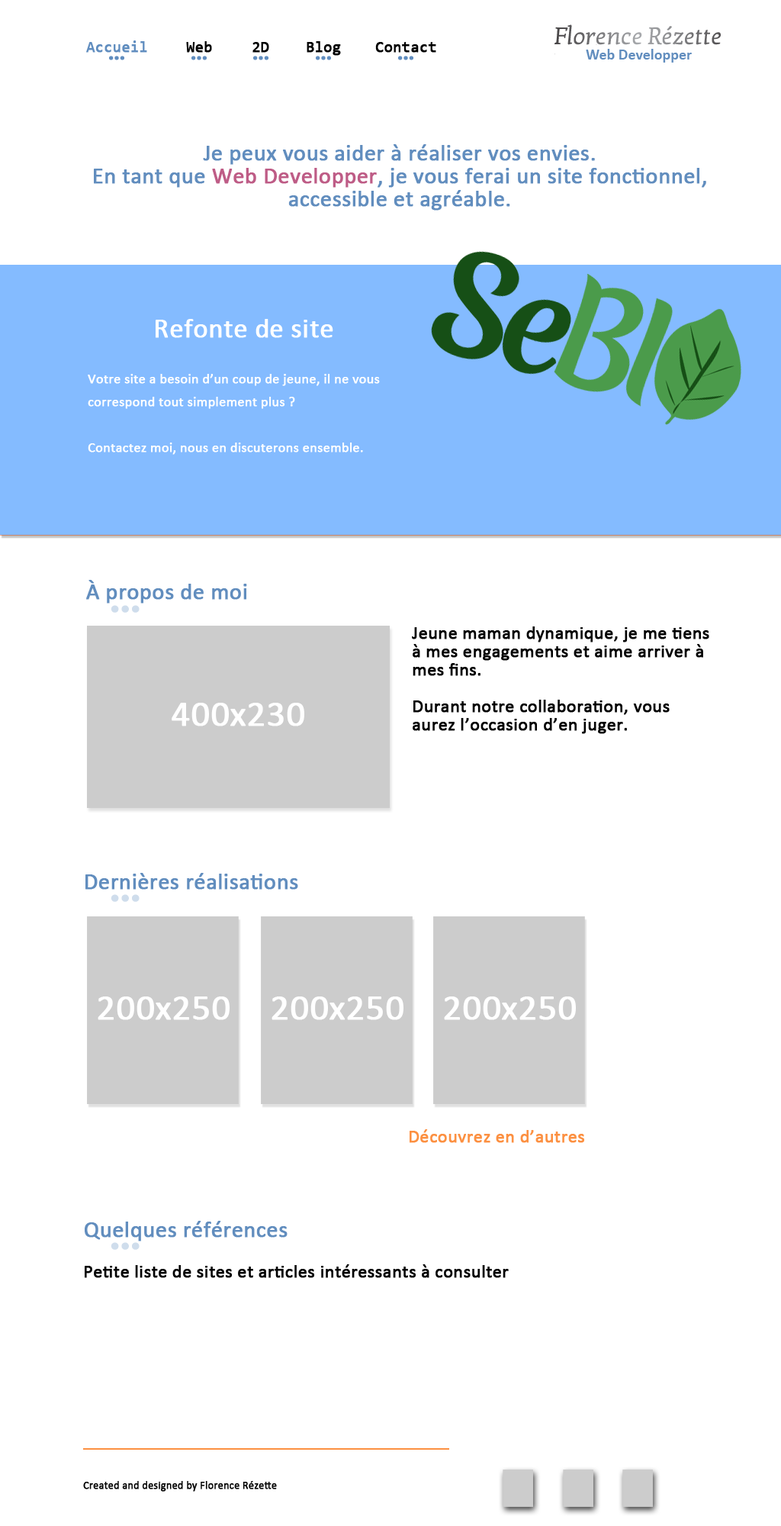
<style>
.page{position:relative;width:781px;height:1526px;background:#ffffff}
.page>*{position:absolute;margin:0}
.t1{font:15.3px "Consolas";color:#608dbf;font-weight:bold}
.t2{font:15.3px "Consolas";color:#000000;font-weight:bold}
.t3{font:15.3px "Consolas";color:#000101;font-weight:bold}
.t4{font:22.9px/22.9px "Calibri";color:#618dbe;font-weight:bold}
.t5{font:22.9px/22.9px "Calibri";color:#be5c86;font-weight:bold}
.t6{font:13.7px/22.9px "Calibri";color:#ffffff;font-weight:bold}
.t7{font:27.5px/22.9px "Calibri";color:#ffffff;font-weight:bold}
.t8{font:22.9px "Calibri";color:#618dbe;font-weight:bold}
.t9{font:18.3px/18.3px "Calibri";color:#000000;font-weight:bold}
.t10{font:36.6px "Calibri";color:#ffffff;font-weight:bold}
.t11{font:18.3px "Calibri";color:#fc9041;font-weight:bold}
.t12{font:18.3px "Calibri";color:#000000;font-weight:bold}
.t13{font:10.7px "Calibri";color:#000000;font-weight:bold}
</style>
<div class="page">
<p class="t1" style="left:86px;top:40px;width:61px;height:13px">Accueil</p>
<p class="t2" style="left:186px;top:41px;width:26px;height:12px">Web</p>
<p class="t3" style="left:253px;top:42px;width:16px;height:11px">2D</p>
<p class="t2" style="left:307px;top:41px;width:34px;height:15px">Blog</p>
<p class="t2" style="left:375px;top:42px;width:61px;height:11px">Contact</p>
<p class="t4" style="left:94px;top:144px;width:613px;height:67px;text-align:center">Je peux vous aider à réaliser vos envies. <br>En tant que <span class="t5">Web Developper</span>, je vous ferai un site fonctionnel, <br>accessible et agréable.</p>
<p class="t6" style="left:88px;top:319px;width:292px;height:136px;text-align:center"><span class="t7">Refonte de site<br><br></span>Votre site a besoin d’un coup de jeune, il ne vous correspond tout simplement plus ?<br><br>Contactez moi, nous en discuterons ensemble.</p>
<p class="t8" style="left:86px;top:580px;width:161px;height:24px">À propos de moi</p>
<p class="t9" style="left:412px;top:626px;width:298px;height:108px">Jeune maman dynamique, je me tiens à mes engagements et aime arriver à mes fins. <br><br>Durant notre collaboration, vous aurez l’occasion d’en juger.</p>
<p class="t10" style="left:172px;top:703px;width:132px;height:23px">400x230</p>
<p class="t8" style="left:85px;top:873px;width:213px;height:17px">Dernières réalisations</p>
<p class="t10" style="left:98px;top:997px;width:132px;height:23px">200x250</p>
<p class="t10" style="left:272px;top:997px;width:132px;height:23px">200x250</p>
<p class="t10" style="left:444px;top:997px;width:132px;height:23px">200x250</p>
<p class="t11" style="left:410px;top:1129px;width:174px;height:14px">Découvrez en d’autres</p>
<p class="t8" style="left:85px;top:1221px;width:203px;height:20px">Quelques références</p>
<p class="t12" style="left:85px;top:1264px;width:424px;height:14px">Petite liste de sites et articles intéressants à consulter</p>
<p class="t13" style="left:83px;top:1481px;width:194px;height:11px">Created and designed by Florence Rézette</p>
</div>
